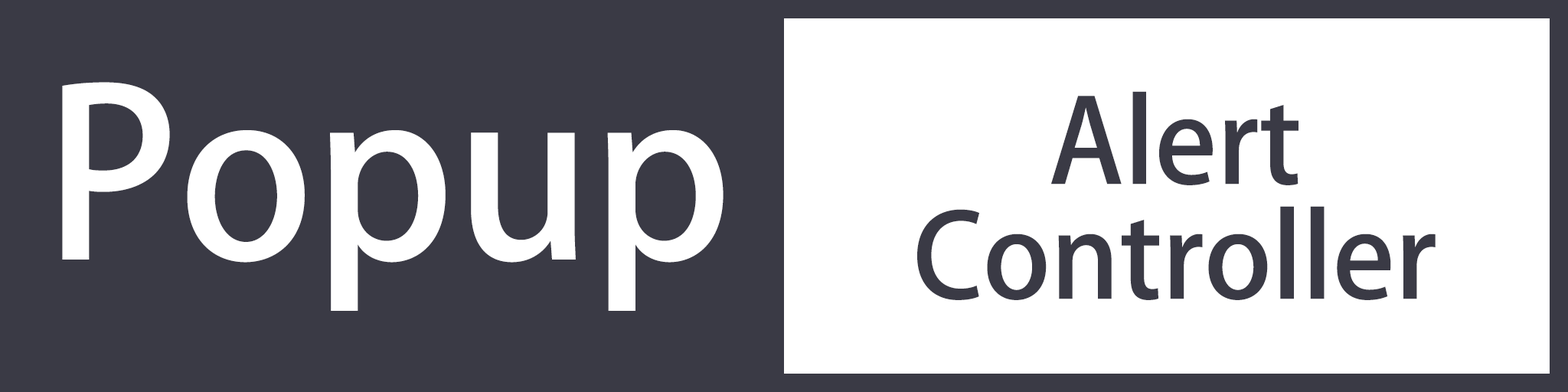
<style>
.page{position:relative;width:1568px;height:392px;background:#3a3a45}
.page>*{position:absolute;margin:0}
.t1{font:229.7px "AdobeHeitiStd-Regular";color:#ffffff}
.t2{font:114.8px/114.8px "AdobeHeitiStd-Regular";color:#3a3a45}
</style>
<div class="page">
<p class="t1" style="left:62px;top:82px;width:662px;height:229px">Popup</p>
<p class="t2" style="left:917px;top:91px;width:519px;height:209px;text-align:center">Alert<br>Controller</p>
</div>
